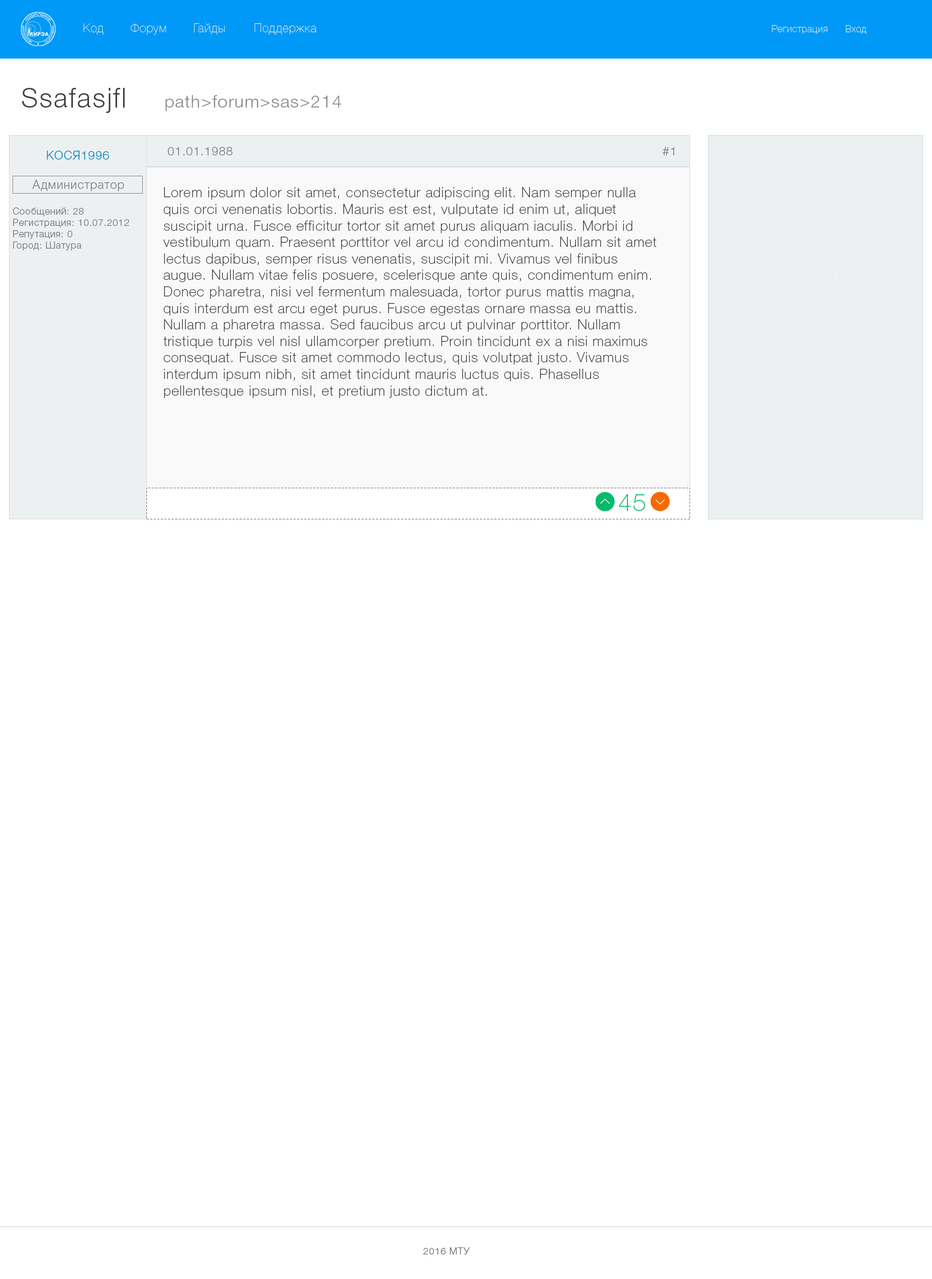
<style>
.page{position:relative;width:932px;height:1279px;background:#ffffff}
.page>*{position:absolute;margin:0}
.t1{font:12px "HelveticaNeueCyr-UltraLight";letter-spacing:0.05em;color:#eeeeee}
.t2{font:9.6px "HelveticaNeueCyr-UltraLight";letter-spacing:0.05em;color:#eeeeee}
.t3{font:26.9px "HelveticaNeueCyr-Light";letter-spacing:0.05em;color:#3e3e3e}
.t4{font:17.3px "HelveticaNeueCyr-Light";letter-spacing:0.05em;color:#878787}
.t5{font:12px "HelveticaNeueCyr-Light";letter-spacing:0.05em;color:#808080}
.t6{font:12px "HelveticaNeueCyr-Light";letter-spacing:0.05em;color:#008bc0}
.t7{font:13.8px "HelveticaNeueCyr-Thin";letter-spacing:0.05em;color:#3a3a3a}
.t8{font:9.4px "HelveticaNeueCyr-Light";letter-spacing:0.05em;color:#808080}
.t9{font:23.9px "HelveticaNeueCyr-Thin";letter-spacing:0.05em;color:#00bb6b}
.t10{font:9.6px "HelveticaNeueCyr-Light";letter-spacing:0.05em;color:#777777}
</style>
<div class="page">
<p class="t1" style="left:83px;top:23px;width:21px;height:12px">Код</p>
<p class="t1" style="left:130px;top:23px;width:36px;height:12px">Форум</p>
<p class="t1" style="left:194px;top:23px;width:31px;height:12px">Гайды</p>
<p class="t1" style="left:255px;top:23px;width:62px;height:12px">Поддержка</p>
<p class="t2" style="left:772px;top:25px;width:56px;height:9px">Регистрация</p>
<p class="t2" style="left:846px;top:25px;width:21px;height:9px">Вход</p>
<p class="t3" style="left:22px;top:88px;width:103px;height:25px">Ssafasjfl</p>
<p class="t4" style="left:166px;top:95px;width:175px;height:16px">path&gt;forum&gt;sas&gt;214</p>
<p class="t5" style="left:168px;top:146px;width:64px;height:9px">01.01.1988</p>
<p class="t5" style="left:663px;top:147px;width:12px;height:8px">#1</p>
<p class="t6" style="left:47px;top:151px;width:62px;height:9px">КОСЯ1996</p>
<p class="t5" style="left:32px;top:180px;width:92px;height:11px">Администратор</p>
<p class="t7" style="left:163px;top:187px;width:494px;height:211px">Lorem ipsum dolor sit amet, consectetur adipiscing elit. Nam semper nulla quis orci venenatis lobortis. Mauris est est, vulputate id enim ut, aliquet suscipit urna. Fusce efficitur tortor sit amet purus aliquam iaculis. Morbi id vestibulum quam. Praesent porttitor vel arcu id condimentum. Nullam sit amet lectus dapibus, semper risus venenatis, suscipit mi. Vivamus vel finibus augue. Nullam vitae felis posuere, scelerisque ante quis, condimentum enim. Donec pharetra, nisi vel fermentum malesuada, tortor purus mattis magna, quis interdum est arcu eget purus. Fusce egestas ornare massa eu mattis.<br>Nullam a pharetra massa. Sed faucibus arcu ut pulvinar porttitor. Nullam tristique turpis vel nisl ullamcorper pretium. Proin tincidunt ex a nisi maximus consequat. Fusce sit amet commodo lectus, quis volutpat justo. Vivamus interdum ipsum nibh, sit amet tincidunt mauris luctus quis. Phasellus pellentesque ipsum nisl, et pretium justo dictum at.</p>
<p class="t8" style="left:13px;top:207px;width:116px;height:43px">Сообщений: 28<br>Регистрация: 10.07.2012<br>Репутация: 0<br>Город: Шатура</p>
<p class="t9" style="left:619px;top:494px;width:26px;height:17px">45</p>
<p class="t10" style="left:423px;top:1247px;width:47px;height:7px">2016 МТУ</p>
</div>
